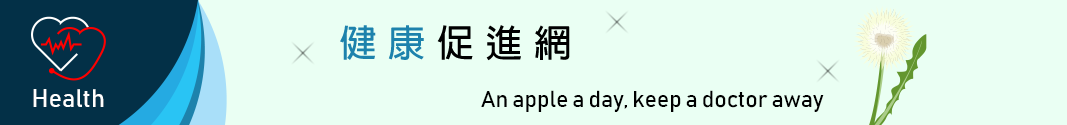
<style>
.page{position:relative;width:1067px;height:125px;background:#eafff3}
.page>*{position:absolute;margin:0}
.t1{font:25px "Bahnschrift";color:#ffffff}
.t2{font:22.9px "Bahnschrift";color:#000000}
</style>
<div class="page">
<p class="t1" style="left:33px;top:89px;width:71px;height:18px">Health</p>
<p class="t2" style="left:481px;top:90px;width:343px;height:22px">An apple a day, keep a doctor away</p>
</div>
